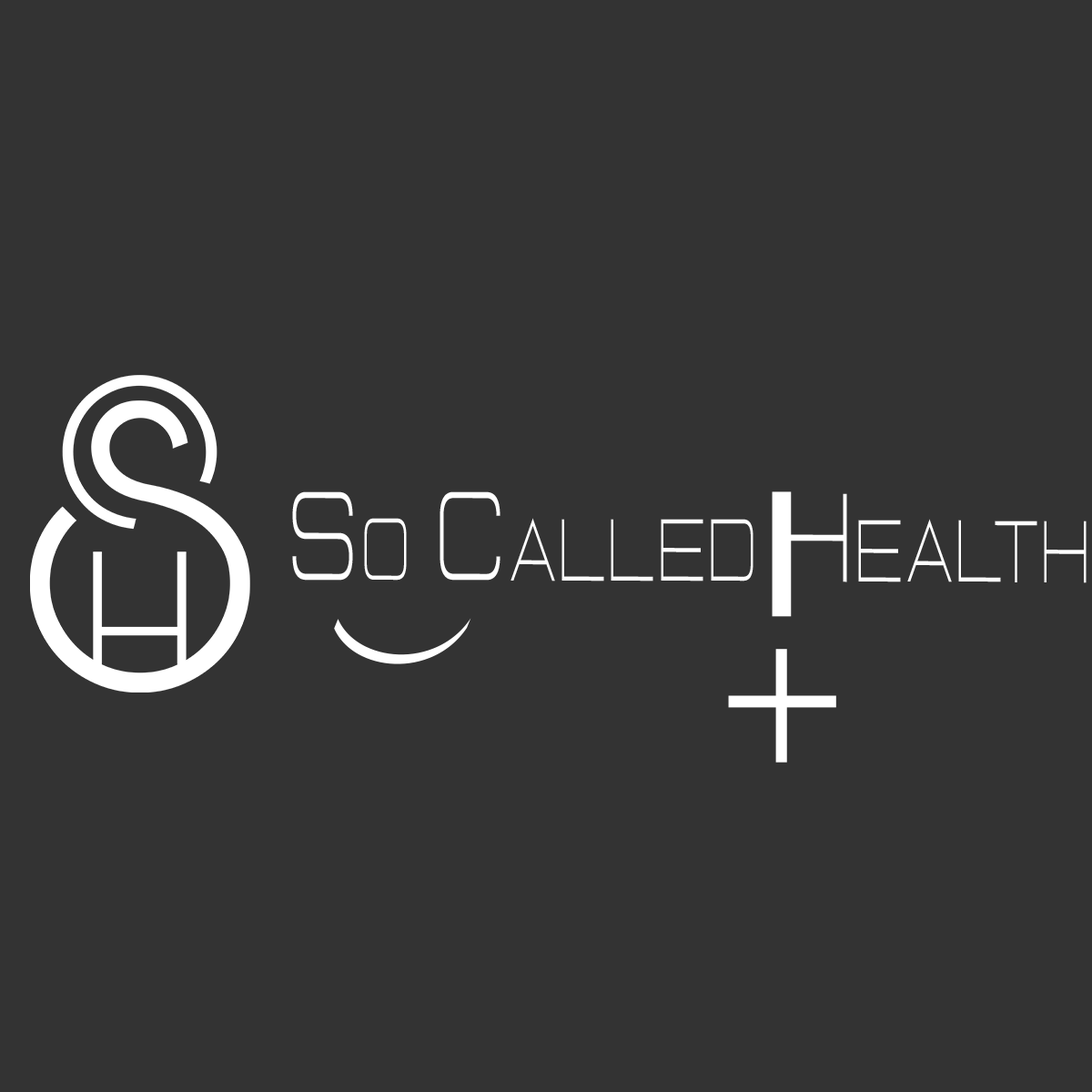
<style>
.page{position:relative;width:1092px;height:1092px;background:#333333}
.page>*{position:absolute;margin:0}
.t1{font:119.6px "Lastica";letter-spacing:0.1em;color:#ffffff;font-variant:small-caps;scale:0.57 1}
.t2{font:384.9px "Lastica";letter-spacing:0.1em;color:#ffffff;font-variant:small-caps;scale:0.6 1}
.t3{font:193.4px "Lastica";letter-spacing:0.1em;color:#ffffff;font-variant:small-caps}
.t4{font:225.8px "Lastica";letter-spacing:0.1em;color:#ffffff;font-variant:small-caps;scale:0.93 1}
.t5{font:238.2px "Lastica";letter-spacing:0.1em;color:#ffffff;font-variant:small-caps;scale:0.84 1}
</style>
<div class="page">
<p class="t1" style="left:292px;top:491px;width:795px;height:92px">So Called Health</p>
<p class="t2" style="left:772px;top:491px;width:20px;height:126px;rotate:90deg">-</p>
<p class="t3" style="left:334px;top:618px;width:137px;height:46px;rotate:-167deg">-</p>
<p class="t4" style="left:775px;top:649px;width:12px;height:114px;rotate:-90deg">-</p>
<p class="t5" style="left:728px;top:695px;width:108px;height:13px;rotate:180deg">-</p>
</div>
